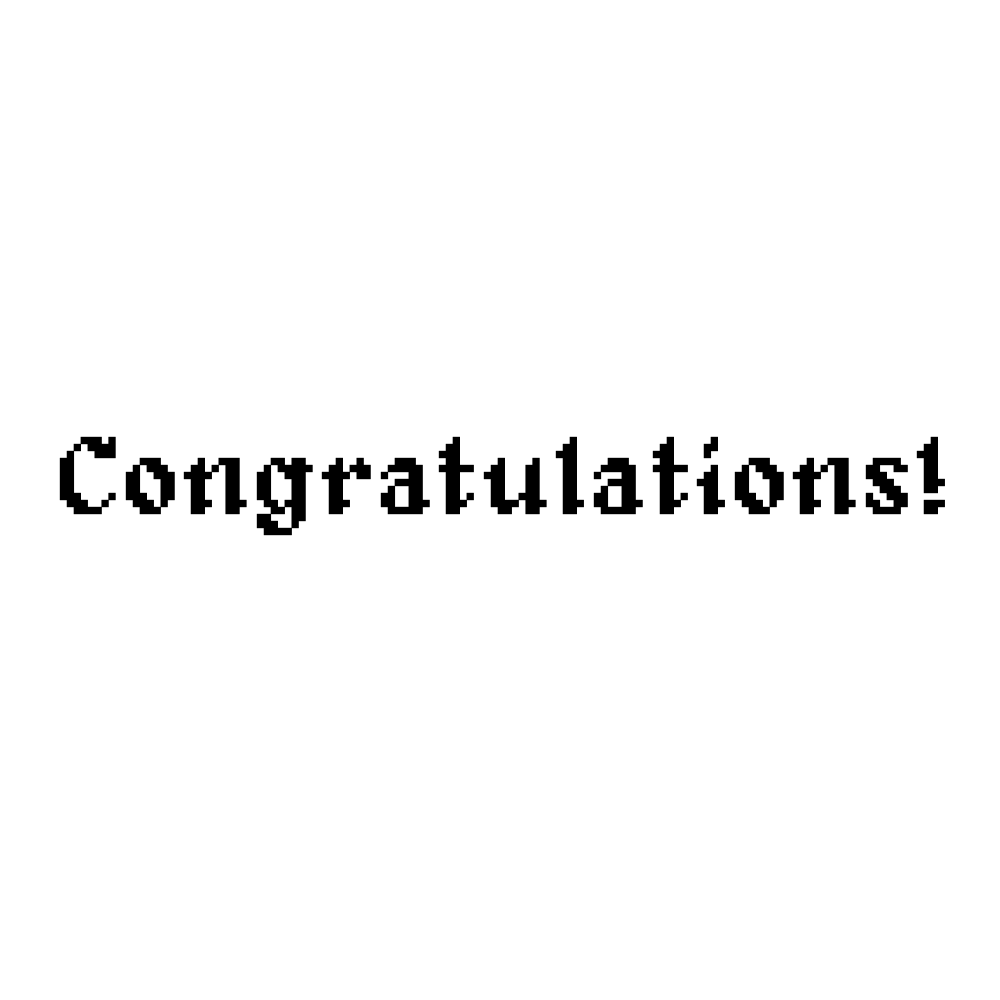
<style>
.page{position:relative;width:1000px;height:1000px;background:#ffffff}
.page>*{position:absolute;margin:0}
.t1{font:111.9px "Alagard";color:#000000;font-weight:bold}
</style>
<div class="page">
<p class="t1" style="left:59px;top:436px;width:886px;height:100px">Congratulations!</p>
</div>
